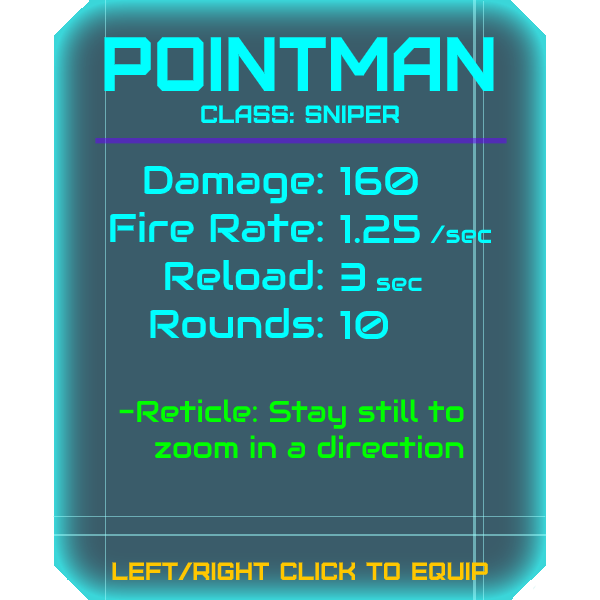
<style>
.page{position:relative;width:600px;height:600px;background:#3a5c6a}
.page>*{position:absolute;margin:0}
.t1{font:76.8px "Furore";color:#00ffff;scale:0.96 1}
.t2{font:25px "Furore";color:#00ffff}
.t3{font:40px "Audiowide-Regular";color:#00ffff}
.t4{font:25px "Audiowide-Regular";color:#00ffff}
.t5{font:30px "Audiowide-Regular";color:#00ff00}
.t6{font:40px "Audiowide-Regular";color:#00ff00}
.t7{font:25px "Furore";color:#ffc700}
</style>
<div class="page">
<p class="t1" style="left:104px;top:37px;width:390px;height:54px">pointman</p>
<p class="t2" style="left:201px;top:105px;width:198px;height:18px">Class: sniper</p>
<p class="t3" style="left:110px;top:165px;width:213px;height:173px;text-align:right">Damage:<br>Fire Rate:<br>Reload:<br>Rounds:</p>
<p class="t3" style="left:340px;top:166px;width:152px;height:173px">160<br>1.25 <span class="t4">/sec<br></span>3 <span class="t4">sec<br></span>10</p>
<p class="t5" style="left:119px;top:399px;width:345px;height:59px"><span class="t6"><br><br><br><br><br></span>-Reticle: Stay still to<br> zoom in a direction</p>
<p class="t7" style="left:112px;top:562px;width:376px;height:18px">left/right click to equip</p>
</div>
